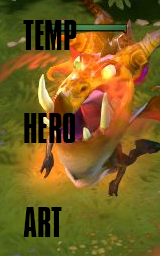
<style>
.page{position:relative;width:160px;height:256px}
.page>*{position:absolute;margin:0}
.t1{font:53.3px "Compacta";color:#000000;font-variant:small-caps}
</style>
<div class="page">
<p class="t1" style="left:23px;top:20px;width:54px;height:217px">temp<br>hero<br>art</p>
</div>
